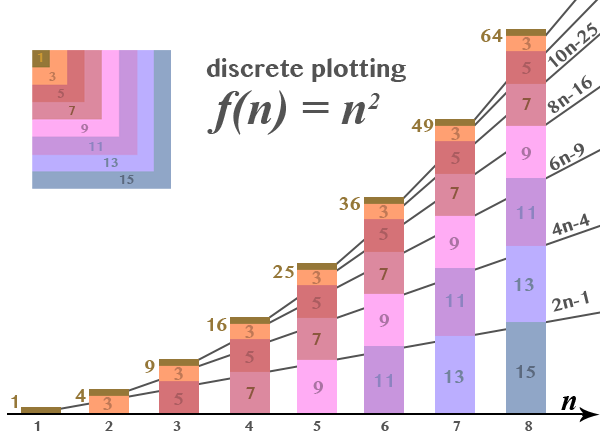
<style>
.page{position:relative;width:600px;height:435px;background:#ffffff}
.page>*{position:absolute;margin:0}
.t1{font:18px "OriyaMN-Bold";color:#957738}
.t2{font:18px "OriyaMN-Bold";color:#535353}
.t3{font:18px "OriyaMN-Bold";color:#bf7855}
.t4{font:13px "OriyaMN-Bold";color:#cc9933}
.t5{font:24px "OriyaMN-Bold";color:#535353}
.t6{font:18px "OriyaMN-Bold";color:#ab5c60}
.t7{font:13px "OriyaMN-Bold";color:#bf7855}
.t8{font:13px "OriyaMN-Bold";color:#ab5c60}
.t9{font:48px "TimesNewRomanPS-BoldItalicMT";color:#535353}
.t10{font:24px "TimesNewRomanPS-BoldItalicMT";color:#535353}
.t11{font:18px "OriyaMN-Bold";color:#8b573e}
.t12{font:13px "OriyaMN-Bold";color:#8b573e}
.t13{font:13px "OriyaMN-Bold";color:#aa73a3}
.t14{font:13px "OriyaMN-Bold";color:#8d83c0}
.t15{font:18px "OriyaMN-Bold";color:#aa73a3}
.t16{font:13px "OriyaMN-Bold";color:#72839d}
.t17{font:13px "OriyaMN-Bold";color:#5b697e}
.t18{font:18px "OriyaMN-Bold";color:#8d83c0}
.t19{font:18px "OriyaMN-Bold";color:#72839d}
.t20{font:18px "OriyaMN-Bold";color:#5b697e}
.t21{font:30px "TimesNewRomanPS-BoldItalicMT";color:#000000}
.t22{font:14px "OriyaMN-Bold";color:#535353}
</style>
<div class="page">
<p class="t1" style="left:481px;top:29px;width:22px;height:13px">64</p>
<p class="t2" style="left:547px;top:22px;width:51px;height:46px;rotate:-40deg">10n-25</p>
<p class="t3" style="left:522px;top:37px;width:9px;height:13px">3</p>
<p class="t4" style="left:37px;top:53px;width:6px;height:9px">1</p>
<p class="t5" style="left:206px;top:58px;width:200px;height:24px">discrete plotting</p>
<p class="t6" style="left:522px;top:62px;width:9px;height:12px">5</p>
<p class="t7" style="left:49px;top:72px;width:7px;height:9px">3</p>
<p class="t2" style="left:547px;top:74px;width:45px;height:39px;rotate:-36deg">8n-16</p>
<p class="t8" style="left:57px;top:89px;width:7px;height:9px">5</p>
<p class="t9" style="left:207px;top:90px;width:159px;height:45px">f(n) = n</p>
<p class="t10" style="left:368px;top:93px;width:12px;height:16px">2</p>
<p class="t11" style="left:522px;top:98px;width:9px;height:12px">7</p>
<p class="t12" style="left:68px;top:106px;width:7px;height:9px">7</p>
<p class="t13" style="left:81px;top:124px;width:8px;height:9px">9</p>
<p class="t1" style="left:411px;top:119px;width:23px;height:13px">49</p>
<p class="t3" style="left:451px;top:127px;width:9px;height:13px">3</p>
<p class="t14" style="left:89px;top:142px;width:13px;height:9px">11</p>
<p class="t15" style="left:521px;top:147px;width:10px;height:13px">9</p>
<p class="t2" style="left:550px;top:143px;width:34px;height:27px;rotate:-28deg">6n-9</p>
<p class="t16" style="left:103px;top:158px;width:15px;height:9px">13</p>
<p class="t6" style="left:451px;top:152px;width:9px;height:12px">5</p>
<p class="t17" style="left:119px;top:175px;width:15px;height:9px">15</p>
<p class="t1" style="left:339px;top:197px;width:21px;height:13px">36</p>
<p class="t11" style="left:450px;top:187px;width:9px;height:12px">7</p>
<p class="t3" style="left:379px;top:205px;width:9px;height:13px">3</p>
<p class="t18" style="left:516px;top:206px;width:18px;height:13px">11</p>
<p class="t2" style="left:552px;top:213px;width:38px;height:22px;rotate:-18deg">4n-4</p>
<p class="t6" style="left:379px;top:228px;width:9px;height:12px">5</p>
<p class="t15" style="left:449px;top:237px;width:10px;height:13px">9</p>
<p class="t1" style="left:273px;top:265px;width:21px;height:13px">25</p>
<p class="t11" style="left:379px;top:268px;width:9px;height:12px">7</p>
<p class="t3" style="left:312px;top:271px;width:9px;height:13px">3</p>
<p class="t19" style="left:514px;top:278px;width:20px;height:13px">13</p>
<p class="t18" style="left:445px;top:294px;width:18px;height:13px">11</p>
<p class="t2" style="left:552px;top:290px;width:37px;height:22px;rotate:-14deg">2n-1</p>
<p class="t6" style="left:312px;top:297px;width:9px;height:12px">5</p>
<p class="t1" style="left:207px;top:318px;width:20px;height:13px">16</p>
<p class="t15" style="left:379px;top:314px;width:10px;height:13px">9</p>
<p class="t3" style="left:245px;top:325px;width:9px;height:13px">3</p>
<p class="t11" style="left:312px;top:333px;width:9px;height:12px">7</p>
<p class="t6" style="left:245px;top:351px;width:9px;height:12px">5</p>
<p class="t1" style="left:145px;top:360px;width:10px;height:13px">9</p>
<p class="t20" style="left:516px;top:365px;width:20px;height:13px">15</p>
<p class="t3" style="left:174px;top:367px;width:9px;height:13px">3</p>
<p class="t18" style="left:374px;top:374px;width:18px;height:13px">11</p>
<p class="t19" style="left:444px;top:370px;width:20px;height:13px">13</p>
<p class="t1" style="left:75px;top:389px;width:11px;height:13px">4</p>
<p class="t11" style="left:246px;top:387px;width:9px;height:12px">7</p>
<p class="t15" style="left:313px;top:381px;width:10px;height:13px">9</p>
<p class="t1" style="left:11px;top:395px;width:6px;height:13px">1</p>
<p class="t3" style="left:103px;top:397px;width:9px;height:13px">3</p>
<p class="t6" style="left:174px;top:393px;width:9px;height:12px">5</p>
<p class="t21" style="left:561px;top:396px;width:15px;height:14px">n</p>
<p class="t22" style="left:34px;top:421px;width:499px;height:10px">1                2               3                4               5               6                7                8</p>
</div>
